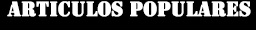
<style>
.page{position:relative;width:256px;height:30px;background:#000000}
.page>*{position:absolute;margin:0}
.t1{font:21.6px "Stencil";color:#ffffff;font-weight:bold;scale:0.97 1}
</style>
<div class="page">
<p class="t1" style="left:7px;top:1px;width:244px;height:16px">ARTICULOS POPULARES</p>
</div>
